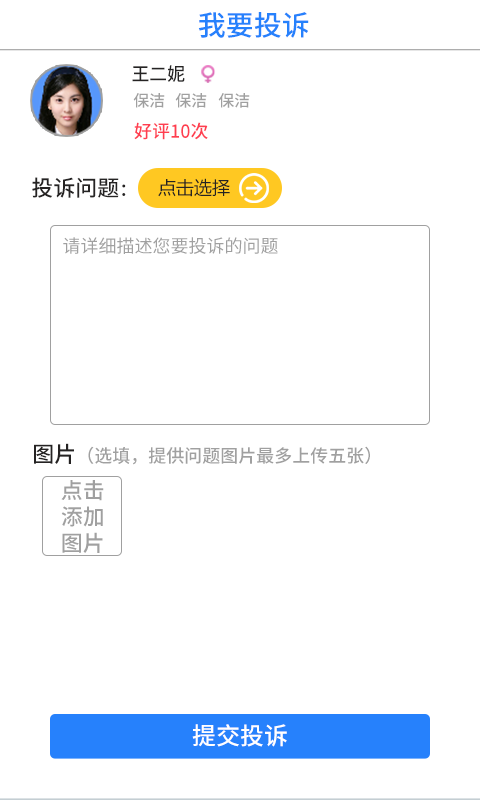
<style>
.page{position:relative;width:480px;height:800px;background:#ffffff}
.page>*{position:absolute;margin:0}
.t1{font:28px "NotoSansHans-Medium";color:#2681fc}
.t2{font:18.3px "NotoSansHans-Medium";color:#252323}
.t3{font:16px "NotoSansHans-Medium";color:#a0a0a0}
.t4{font:18px "NotoSansHans-Medium";color:#ff3e50}
.t5{font:22px "NotoSansHans-Medium";color:#252323}
.t6{font:18px "NotoSansHans-Medium";color:#252323}
.t7{font:18px "NotoSansHans-Regular";color:#a0a0a0}
.t8{font:18px "NotoSansHans-Medium";color:#a0a0a0}
.t9{font:22px "NotoSansHans-Medium";color:#a0a0a0}
.t10{font:24px "NotoSansHans-Medium";color:#ffffff}
</style>
<div class="page">
<p class="t1" style="left:198px;top:12px;width:111px;height:26px">我要投诉</p>
<p class="t2" style="left:132px;top:65px;width:53px;height:17px">王二妮</p>
<p class="t3" style="left:133px;top:93px;width:32px;height:15px">保洁</p>
<p class="t3" style="left:175px;top:93px;width:32px;height:15px">保洁</p>
<p class="t3" style="left:218px;top:93px;width:32px;height:15px">保洁</p>
<p class="t4" style="left:134px;top:122px;width:74px;height:18px">好评10次</p>
<p class="t5" style="left:32px;top:177px;width:94px;height:21px">投诉问题<span class="t6">：</span></p>
<p class="t7" style="left:63px;top:237px;width:215px;height:17px">请详细描述您要投诉的问题</p>
<p class="t8" style="left:34px;top:443px;width:336px;height:22px"><span class="t5">图片</span>（选填，提供问题图片最多上传五张）</p>
<p class="t9" style="left:61px;top:480px;width:43px;height:73px">点击<br>添加<br>图片</p>
<p class="t10" style="left:192px;top:724px;width:95px;height:23px">提交投诉</p>
</div>
